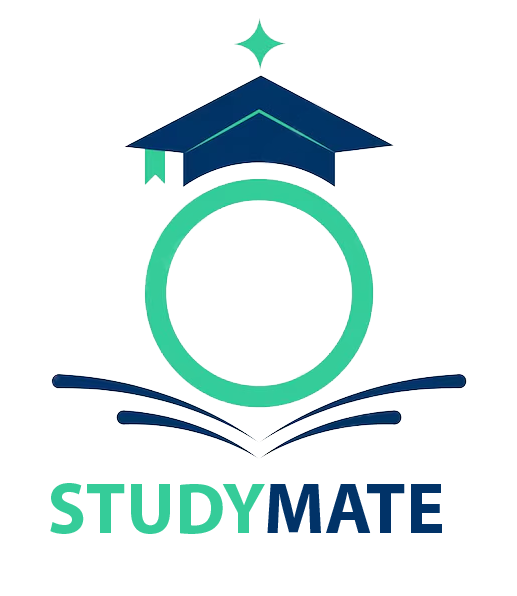
<style>
.page{position:relative;width:517px;height:596px;background:#ffffff}
.page>*{position:absolute;margin:0}
.t1{font:72px "MyriadPro-Bold";color:#35cc99}
.t2{font:72px "MyriadPro-Bold";color:#013368}
</style>
<div class="page">
<p class="t1" style="left:50px;top:483px;width:392px;height:51px">STUDY<span class="t2">MATE</span></p>
</div>
